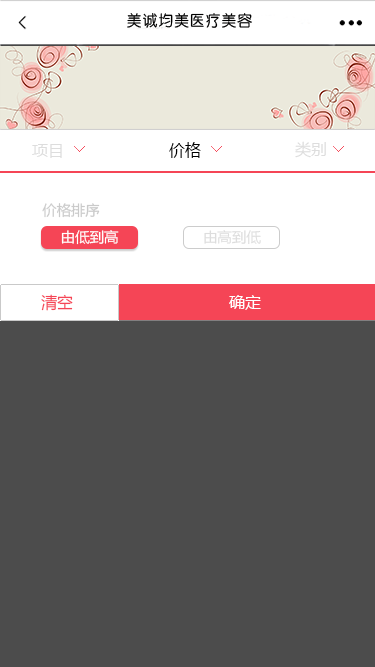
<style>
.page{position:relative;width:375px;height:667px;background:#4c4c4c}
.page>*{position:absolute;margin:0}
.t1{font:16px "MicrosoftYaHei";letter-spacing:0.005em;color:#dddddd}
.t2{font:16px "MicrosoftYaHei";letter-spacing:0.005em;color:#000000}
.t3{font:14px "MicrosoftYaHei";letter-spacing:0.005em;color:#cacaca}
.t4{font:14px "MicrosoftYaHei";letter-spacing:0.005em;color:#ffffff}
.t5{font:14px "MicrosoftYaHei";letter-spacing:0.005em;color:#dddddd}
.t6{font:16px "MicrosoftYaHei";letter-spacing:0.005em;color:#f54556}
.t7{font:16px "MicrosoftYaHei";letter-spacing:0.005em;color:#ffffff}
</style>
<div class="page">
<p class="t1" style="left:32px;top:144px;width:30px;height:14px">项目</p>
<p class="t2" style="left:169px;top:142px;width:32px;height:16px">价格</p>
<p class="t1" style="left:295px;top:141px;width:31px;height:17px">类别</p>
<p class="t3" style="left:42px;top:203px;width:58px;height:15px">价格排序</p>
<p class="t4" style="left:61px;top:230px;width:58px;height:15px">由低到高</p>
<p class="t5" style="left:204px;top:230px;width:57px;height:14px">由高到低</p>
<p class="t6" style="left:41px;top:294px;width:32px;height:17px">清空</p>
<p class="t7" style="left:229px;top:295px;width:32px;height:15px">确定</p>
</div>
